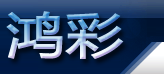
<style>
.page{position:relative;width:164px;height:74px}
.page>*{position:absolute;margin:0}
.t1{font:48px "MicrosoftYaHei";font-weight:bold;scale:1.2 1}
</style>
<div class="page">
<p class="t1" style="left:6px;top:11px;width:118px;height:48px">鸿彩</p>
</div>
